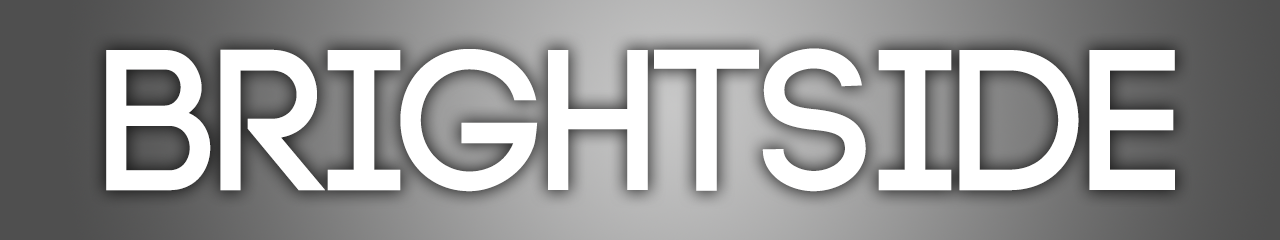
<style>
.page{position:relative;width:1280px;height:240px;background:#ffffff}
.page>*{position:absolute;margin:0}
.t1{font:200px "Code-Bold";color:#ffffff}
</style>
<div class="page">
<p class="t1" style="left:106px;top:48px;width:1069px;height:144px">Brightside</p>
</div>
